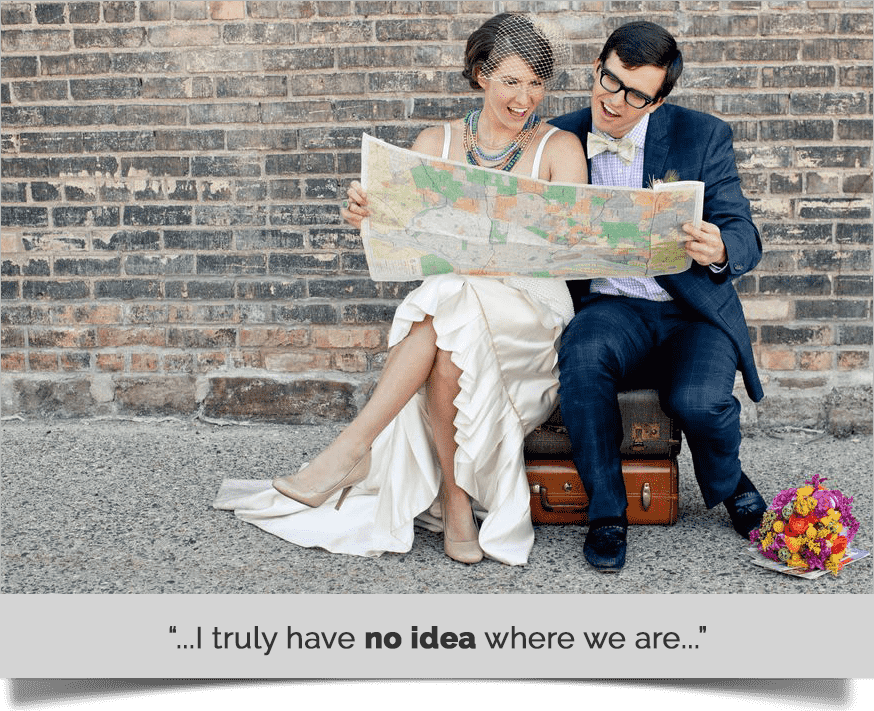
<style>
.page{position:relative;width:874px;height:711px}
.page>*{position:absolute;margin:0}
.t1{font:30px "Raleway-Regular";color:#333333;font-weight:bold}
.t2{font:30px "Raleway-ExtraBold";color:#333333;font-weight:bold}
</style>
<div class="page">
<p class="t1" style="left:169px;top:626px;width:537px;height:30px">“...I truly have <span class="t2">no idea</span> where we are...”</p>
</div>
